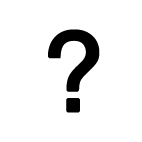
<style>
.page{position:relative;width:142px;height:142px;background:#ffffff}
.page>*{position:absolute;margin:0}
.t1{font:110px "Helvetica";color:#000000;font-weight:bold}
</style>
<div class="page">
<p class="t1" style="left:48px;top:29px;width:52px;height:84px">?</p>
</div>
